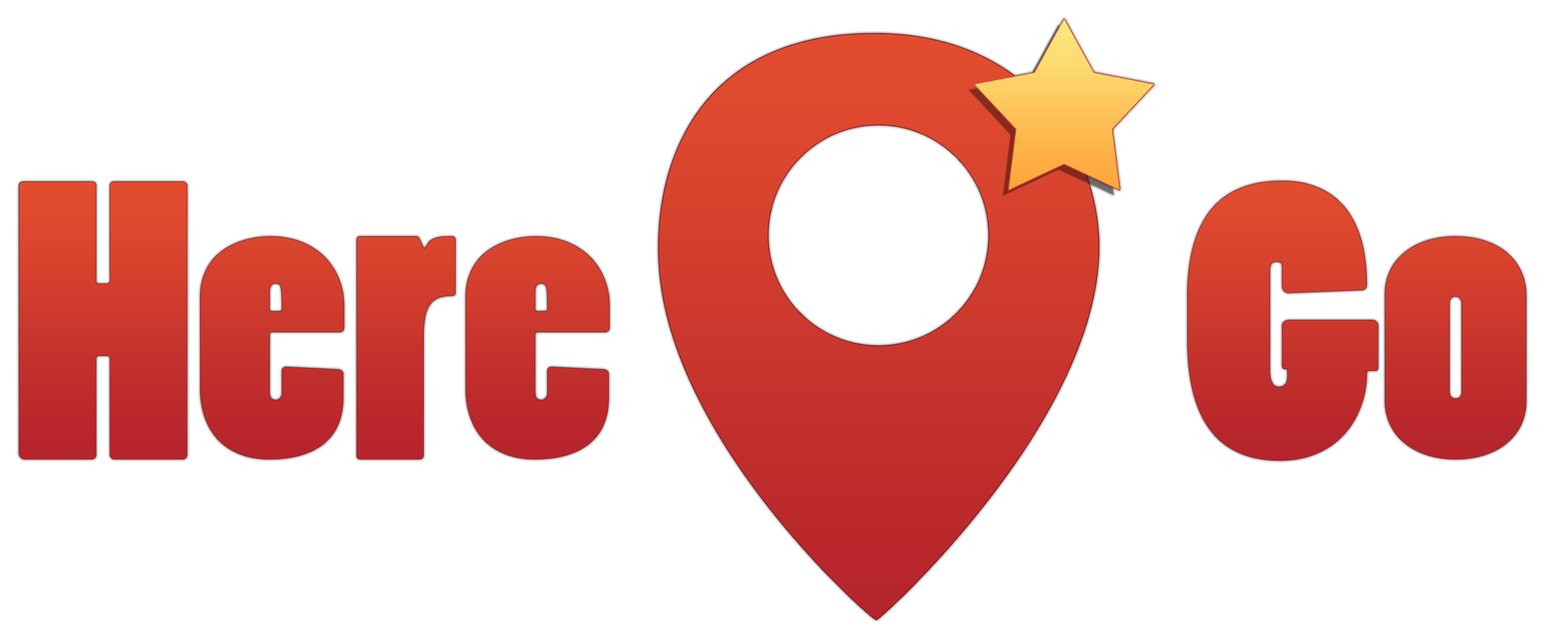
<style>
.page{position:relative;width:1568px;height:639px;background:#ffffff}
.page>*{position:absolute;margin:0}
.t1{font:369.3px "PoplarStd";color:#c9362d;scale:1.1 1}
.t2{font:369.3px "PoplarStd";color:#c8352d;scale:1.1 1}
</style>
<div class="page">
<p class="t1" style="left:19px;top:182px;width:591px;height:277px">Here</p>
<p class="t2" style="left:1188px;top:181px;width:338px;height:279px">Go</p>
</div>
